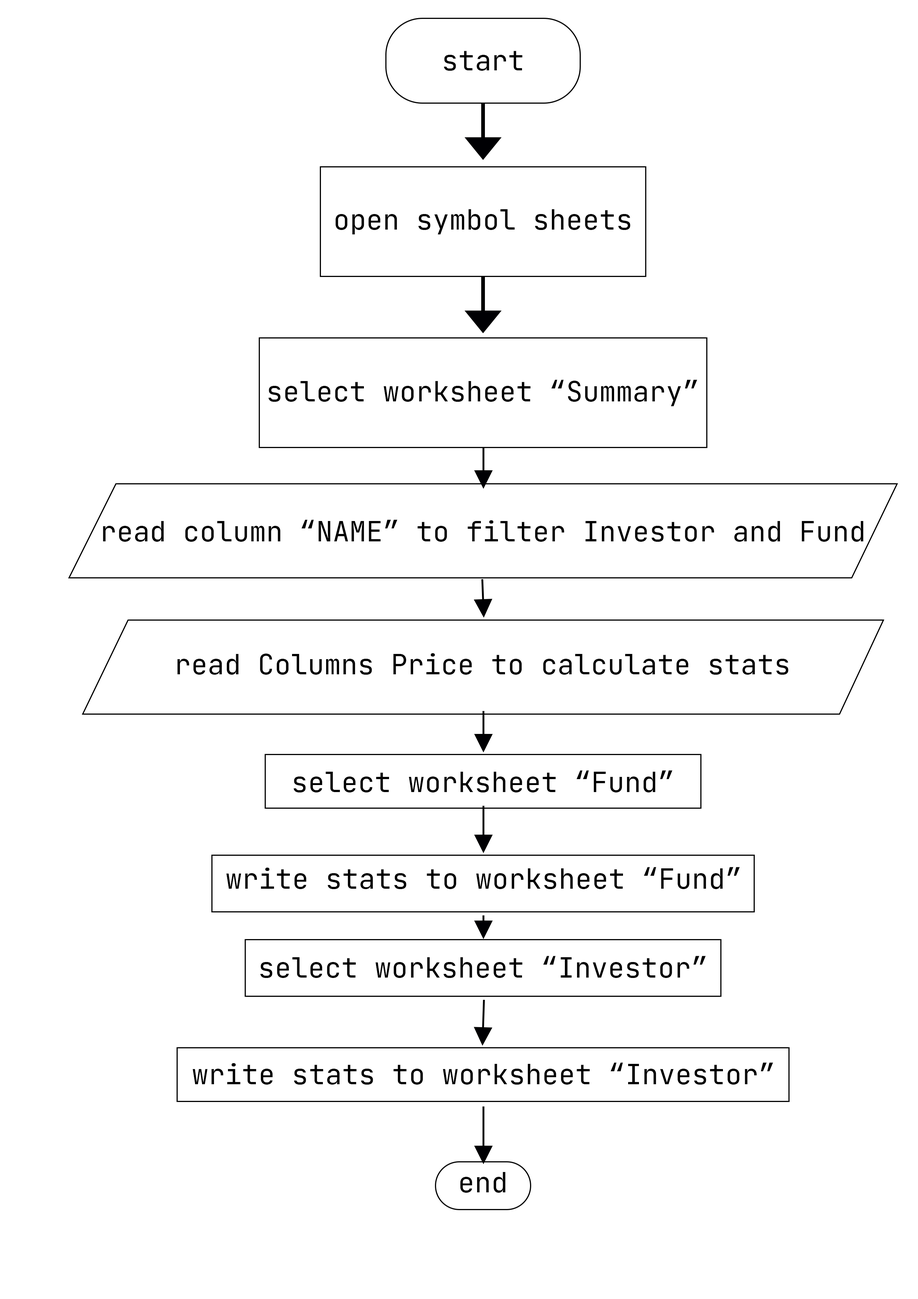
<style>
.page{position:relative;width:918px;height:1299px;background:#ffffff}
.page>*{position:absolute;margin:0}
.t1{font:27.8px "JetBrainsMono-Regular";color:#000000}
.t2{font:27.7px "JetBrainsMono-Regular";color:#000000}
</style>
<div class="page">
<p class="t1" style="left:444px;top:51px;width:78px;height:20px">start</p>
<p class="t2" style="left:335px;top:209px;width:295px;height:25px">open symbol sheets</p>
<p class="t1" style="left:268px;top:379px;width:429px;height:27px">select worksheet “Summary”</p>
<p class="t2" style="left:103px;top:519px;width:761px;height:23px">read column “NAME” to filter Investor and Fund</p>
<p class="t2" style="left:177px;top:653px;width:612px;height:22px">read Columns Price to calculate stats</p>
<p class="t2" style="left:294px;top:770px;width:379px;height:22px">select worksheet “Fund”</p>
<p class="t2" style="left:226px;top:867px;width:514px;height:22px">write stats to worksheet “Fund”</p>
<p class="t2" style="left:260px;top:956px;width:446px;height:22px">select worksheet “Investor”</p>
<p class="t2" style="left:193px;top:1062px;width:580px;height:22px">write stats to worksheet “Investor”</p>
<p class="t2" style="left:460px;top:1172px;width:46px;height:20px">end</p>
</div>
